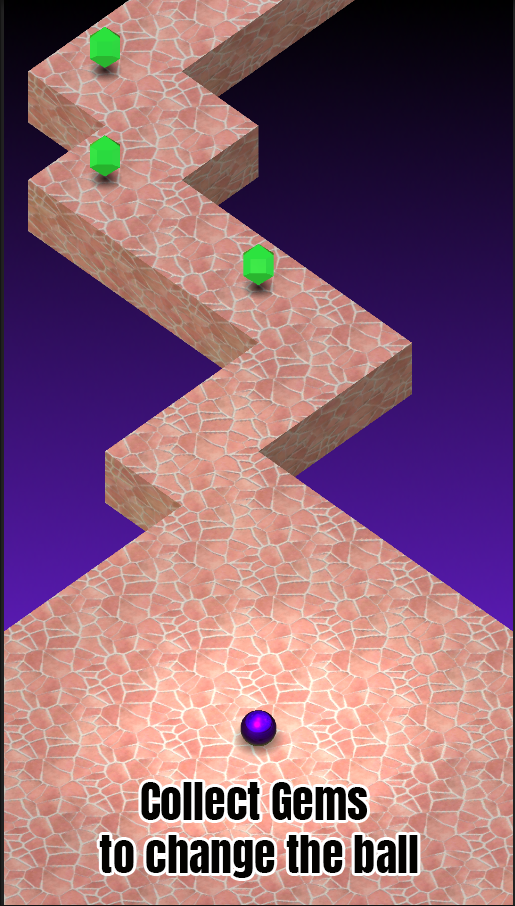
<style>
.page{position:relative;width:515px;height:906px}
.page>*{position:absolute;margin:0}
.t1{font:44px "Anton-Regular";color:#030200}
</style>
<div class="page">
<p class="t1" style="left:99px;top:782px;width:319px;height:96px;text-align:center">Collect Gems <br>to change the ball</p>
</div>
